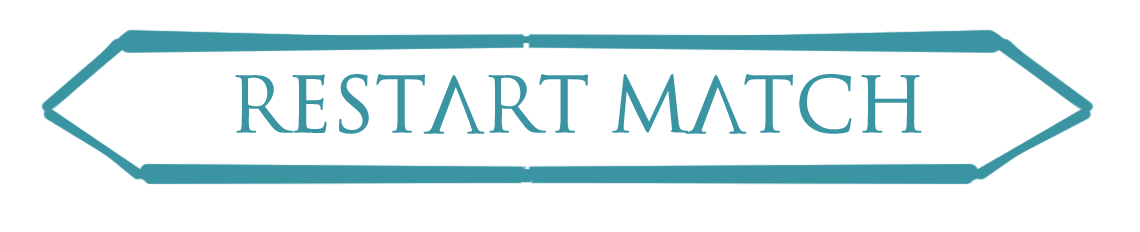
<style>
.page{position:relative;width:1140px;height:232px;background:#ffffff}
.page>*{position:absolute;margin:0}
.t1{font:75px "SpaceandAstronomy";color:#3a94a2}
</style>
<div class="page">
<p class="t1" style="left:235px;top:74px;width:687px;height:60px">Restart Match</p>
</div>
